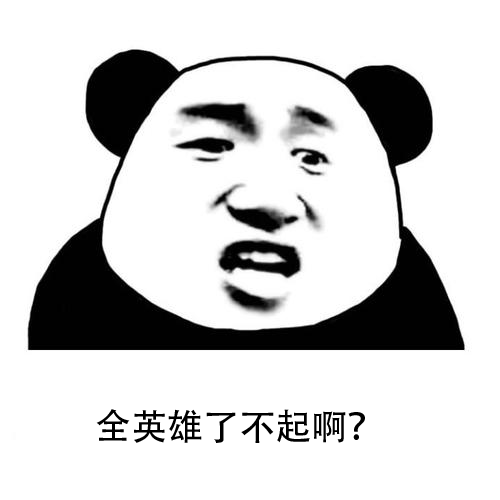
<style>
.page{position:relative;width:500px;height:500px;background:#ffffff}
.page>*{position:absolute;margin:0}
.t1{font:36px "AdobeHeitiStd-Regular";color:#000000}
</style>
<div class="page">
<p class="t1" style="left:96px;top:409px;width:269px;height:34px">全英雄了不起啊？</p>
</div>
